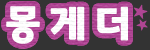
<style>
.page{position:relative;width:150px;height:50px;background:#333333}
.page>*{position:absolute;margin:0}
.t1{font:40.1px "GyeonggiTitleVOTF";letter-spacing:0.1em;color:#ffffff;font-weight:bold}
.t2{font:15.8px "GyeonggiTitleVOTF";letter-spacing:0.1em;color:#af4593;font-weight:bold}
.t3{font:12.4px "GyeonggiTitleVOTF";letter-spacing:0.1em;color:#af4593;font-weight:bold}
</style>
<div class="page">
<p class="t1" style="left:6px;top:6px;width:122px;height:38px">몽게더</p>
<p class="t2" style="left:133px;top:4px;width:15px;height:15px;rotate:15deg">★</p>
<p class="t3" style="left:136px;top:19px;width:12px;height:12px;rotate:45deg">★</p>
</div>
